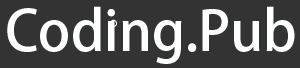
<style>
.page{position:relative;width:300px;height:68px;background:#333333}
.page>*{position:absolute;margin:0}
.t1{font:55px "AdobeHeitiStd-Regular";color:#feffff}
.t2{font:28px "AdobeHeitiStd-Regular";color:#feffff}
</style>
<div class="page">
<p class="t1" style="left:7px;top:6px;width:288px;height:58px">Coding.Pub</p>
<p class="t2" style="left:110px;top:19px;width:7px;height:8px">。</p>
</div>
